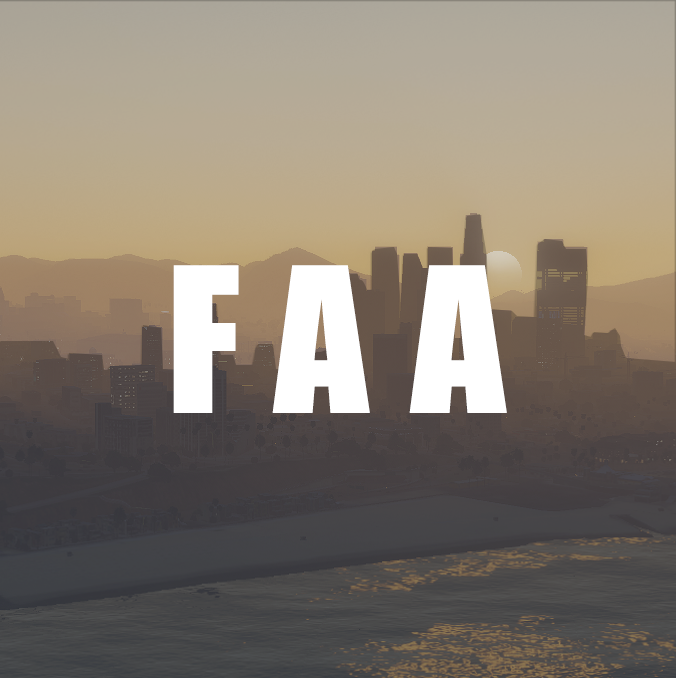
<style>
.page{position:relative;width:676px;height:678px}
.page>*{position:absolute;margin:0}
.t1{font:186.7px "Impact";letter-spacing:0.2em;color:#ffffff}
</style>
<div class="page">
<p class="t1" style="left:173px;top:265px;width:334px;height:148px">FAA</p>
</div>
